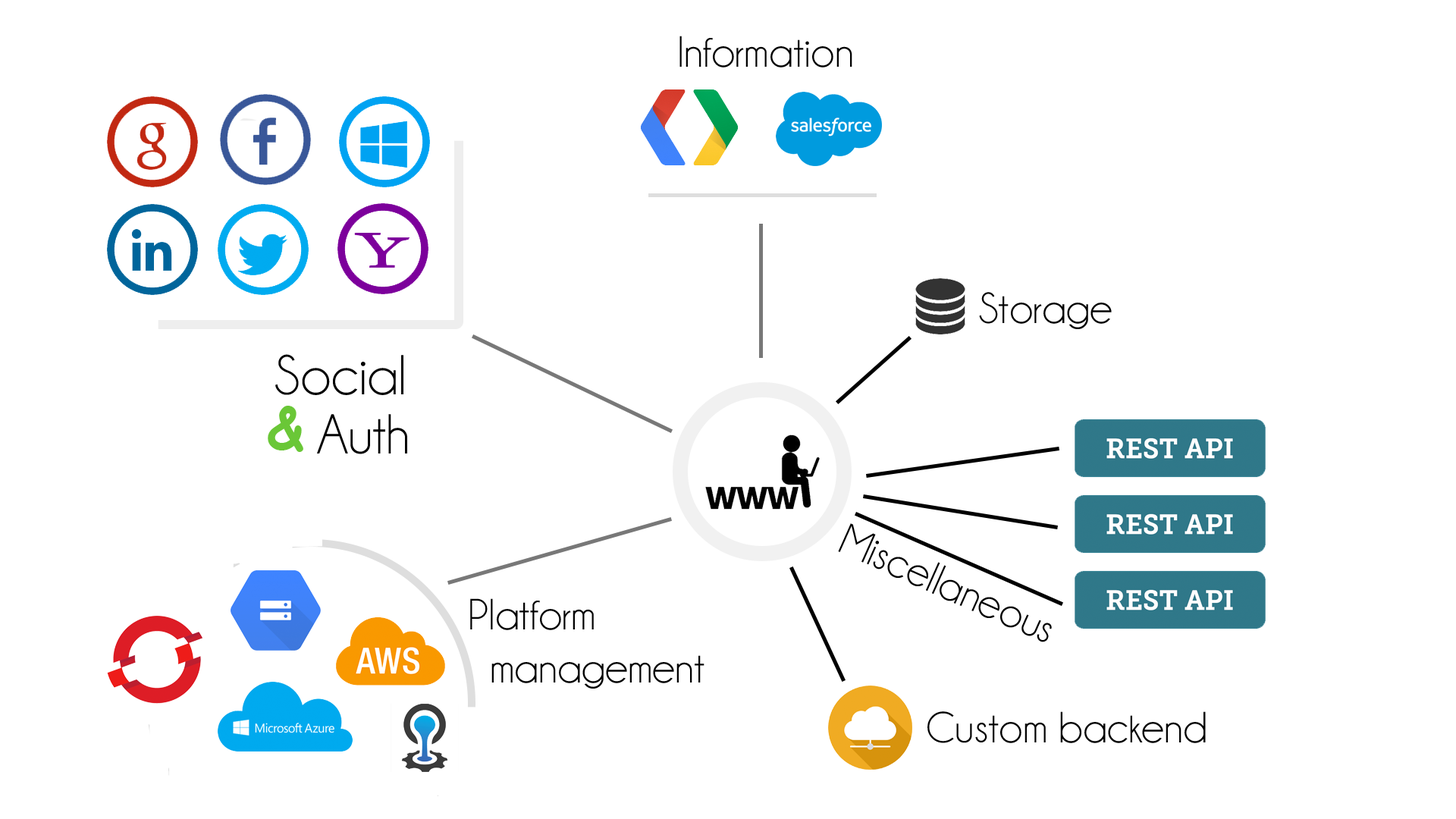
<style>
.page{position:relative;width:1456px;height:819px;background:#ffffff}
.page>*{position:absolute;margin:0}
.t1{font:44.2px "Champagne&Limousines";color:#000000}
.t2{font:56.9px "Champagne&Limousines";color:#000000}
.t3{font:56.9px "ComicSansMS-Bold";color:#6ac737}
</style>
<div class="page">
<p class="t1" style="left:679px;top:36px;width:173px;height:31px">Information</p>
<p class="t1" style="left:979px;top:292px;width:133px;height:37px">Storage</p>
<p class="t2" style="left:275px;top:354px;width:128px;height:41px">Social</p>
<p class="t3" style="left:268px;top:406px;width:35px;height:46px">&amp;</p>
<p class="t2" style="left:317px;top:414px;width:90px;height:40px">Auth</p>
<p class="t1" style="left:838px;top:523px;width:214px;height:119px;rotate:24deg">Miscellaneous</p>
<p class="t1" style="left:470px;top:598px;width:234px;height:91px">Platform<br>   management</p>
<p class="t1" style="left:927px;top:711px;width:279px;height:32px">Custom backend</p>
</div>
